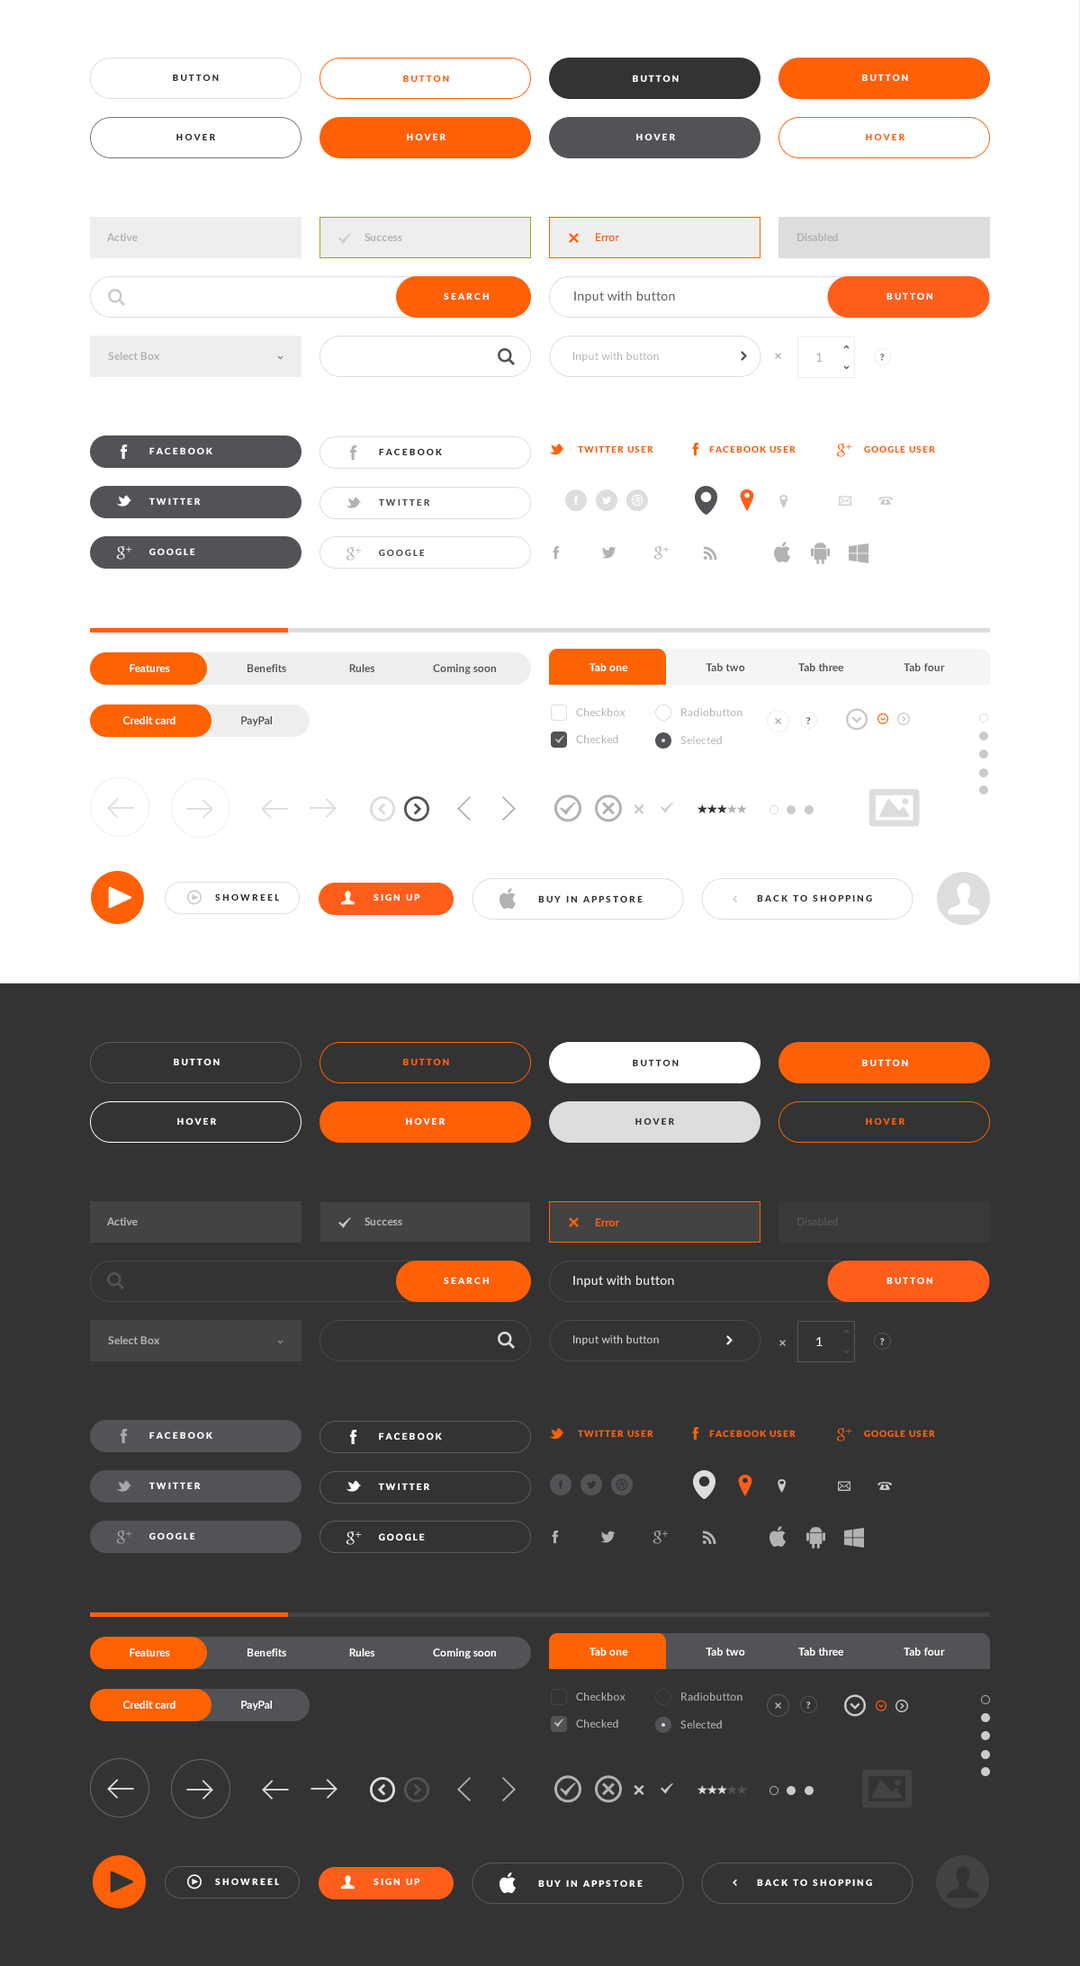
<style>
.page{position:relative;width:1080px;height:1966px;background:#ffffff}
.page>*{position:absolute;margin:0}
.t1{font:9px "Lato-Black";letter-spacing:0.2em;color:#333333}
.t2{font:9px "Lato-Black";letter-spacing:0.2em;color:#ff6008}
.t3{font:9px "Lato-Black";letter-spacing:0.2em;color:#ffffff}
.t4{font:9px "Lato-Black";letter-spacing:0.2em;color:#ff5f07}
.t5{font:10.8px "Lato-Bold";letter-spacing:0.01em;color:#b2b2b2}
.t6{font:10.8px "Lato-Regular";letter-spacing:0.01em;color:#ff6008}
.t7{font:10.8px "Lato-Bold";letter-spacing:0.01em;color:#b1b1b1}
.t8{font:9px "Lato-Black";letter-spacing:0.2em;color:#fefefe}
.t9{font:12.6px "Lato-Regular";letter-spacing:0.02em;color:#515255}
.t10{font:9px "Lato-Bold";letter-spacing:0.2em;color:#ffffff}
.t11{font:10.8px "Lato-Regular";letter-spacing:0.02em;color:#b2b2b2}
.t12{font:12.6px "Lato-Regular";letter-spacing:0.04em;color:#b2b2b2}
.t13{font:9px "Lato-Black";letter-spacing:0.1em;color:#ff5f07}
.t14{font:9px "Lato-Black";letter-spacing:0.2em;color:#515356}
.t15{font:10.8px "Lato-Bold";letter-spacing:0.01em;color:#ffffff}
.t16{font:10.8px "Lato-Bold";letter-spacing:0.01em;color:#515356}
.t17{font:10.8px "Lato-Bold";letter-spacing:0.01em;color:#515255}
.t18{font:10.8px "Lato-Bold";letter-spacing:0.01em;color:#ff6008}
.t19{font:12.6px "Lato-Regular";letter-spacing:0.02em;color:#eeeeee}
.t20{font:10.8px "Lato-Regular";letter-spacing:0.02em;color:#cbcbcb}
.t21{font:12.6px "Lato-Regular";letter-spacing:0.04em;color:#ffffff}
</style>
<div class="page">
<p class="t1" style="left:173px;top:74px;width:46px;height:7px">BUTTON</p>
<p class="t2" style="left:403px;top:75px;width:46px;height:7px">BUTTON</p>
<p class="t3" style="left:633px;top:75px;width:46px;height:7px">BUTTON</p>
<p class="t3" style="left:862px;top:74px;width:46px;height:7px">BUTTON</p>
<p class="t1" style="left:176px;top:133px;width:40px;height:7px">HOVER</p>
<p class="t3" style="left:407px;top:133px;width:39px;height:7px">HOVER</p>
<p class="t3" style="left:636px;top:133px;width:40px;height:7px">HOVER</p>
<p class="t4" style="left:866px;top:133px;width:39px;height:7px">HOVER</p>
<p class="t5" style="left:107px;top:233px;width:31px;height:8px">Active</p>
<p class="t5" style="left:364px;top:233px;width:38px;height:8px">Success</p>
<p class="t6" style="left:596px;top:233px;width:23px;height:9px">Error</p>
<p class="t7" style="left:797px;top:233px;width:41px;height:8px">Disabled</p>
<p class="t8" style="left:444px;top:292px;width:45px;height:8px">SEARCH</p>
<p class="t9" style="left:574px;top:291px;width:101px;height:12px">Input with button</p>
<p class="t10" style="left:886px;top:292px;width:46px;height:9px">BUTTON</p>
<p class="t7" style="left:108px;top:352px;width:52px;height:8px">Select Box</p>
<p class="t11" style="left:573px;top:352px;width:86px;height:10px">Input with button</p>
<p class="t12" style="left:816px;top:353px;width:7px;height:9px">1</p>
<p class="t3" style="left:149px;top:447px;width:63px;height:7px">FACEBOOK</p>
<p class="t1" style="left:379px;top:448px;width:63px;height:7px">FACEBOOK</p>
<p class="t13" style="left:578px;top:446px;width:75px;height:7px">TWITTER USER</p>
<p class="t13" style="left:709px;top:446px;width:87px;height:7px">FACEBOOK USER</p>
<p class="t13" style="left:864px;top:446px;width:71px;height:7px">GOOGLE USER</p>
<p class="t3" style="left:149px;top:498px;width:52px;height:7px">TWITTER</p>
<p class="t14" style="left:379px;top:499px;width:51px;height:7px">TWITTER</p>
<p class="t3" style="left:149px;top:548px;width:46px;height:7px">GOOGLE</p>
<p class="t14" style="left:379px;top:549px;width:46px;height:7px">GOOGLE</p>
<p class="t15" style="left:130px;top:664px;width:40px;height:8px">Features</p>
<p class="t16" style="left:248px;top:664px;width:38px;height:8px">Benefits</p>
<p class="t16" style="left:349px;top:664px;width:26px;height:8px">Rules</p>
<p class="t16" style="left:433px;top:664px;width:63px;height:11px">Coming soon</p>
<p class="t15" style="left:590px;top:663px;width:38px;height:8px">Tab one</p>
<p class="t17" style="left:706px;top:663px;width:39px;height:8px">Tab two</p>
<p class="t17" style="left:798px;top:663px;width:45px;height:8px">Tab three</p>
<p class="t17" style="left:904px;top:663px;width:41px;height:8px">Tab four</p>
<p class="t11" style="left:576px;top:708px;width:50px;height:8px">Checkbox</p>
<p class="t11" style="left:681px;top:708px;width:61px;height:8px">Radiobutton</p>
<p class="t15" style="left:123px;top:716px;width:53px;height:8px">Credit card</p>
<p class="t17" style="left:241px;top:716px;width:31px;height:10px">PayPal</p>
<p class="t11" style="left:576px;top:735px;width:42px;height:8px">Checked</p>
<p class="t11" style="left:680px;top:736px;width:42px;height:8px">Selected</p>
<p class="t1" style="left:215px;top:894px;width:64px;height:7px">SHOWREEL</p>
<p class="t3" style="left:374px;top:894px;width:46px;height:7px">SIGN UP</p>
<p class="t1" style="left:538px;top:896px;width:105px;height:7px">BUY IN APPSTORE</p>
<p class="t1" style="left:757px;top:895px;width:115px;height:7px">BACK TO SHOPPING</p>
<p class="t3" style="left:174px;top:1058px;width:46px;height:8px">BUTTON</p>
<p class="t2" style="left:403px;top:1058px;width:46px;height:8px">BUTTON</p>
<p class="t1" style="left:633px;top:1059px;width:46px;height:7px">BUTTON</p>
<p class="t3" style="left:862px;top:1059px;width:46px;height:7px">BUTTON</p>
<p class="t3" style="left:177px;top:1118px;width:40px;height:7px">HOVER</p>
<p class="t3" style="left:406px;top:1118px;width:40px;height:7px">HOVER</p>
<p class="t1" style="left:635px;top:1118px;width:40px;height:7px">HOVER</p>
<p class="t4" style="left:866px;top:1118px;width:39px;height:7px">HOVER</p>
<p class="t5" style="left:107px;top:1218px;width:31px;height:8px">Active</p>
<p class="t5" style="left:364px;top:1218px;width:38px;height:8px">Success</p>
<p class="t16" style="left:797px;top:1218px;width:41px;height:8px">Disabled</p>
<p class="t18" style="left:596px;top:1219px;width:23px;height:8px">Error</p>
<p class="t8" style="left:444px;top:1277px;width:45px;height:7px">SEARCH</p>
<p class="t19" style="left:573px;top:1275px;width:101px;height:13px">Input with button</p>
<p class="t3" style="left:886px;top:1277px;width:46px;height:7px">BUTTON</p>
<p class="t7" style="left:108px;top:1336px;width:52px;height:9px">Select Box</p>
<p class="t20" style="left:573px;top:1336px;width:86px;height:10px">Input with button</p>
<p class="t21" style="left:816px;top:1337px;width:7px;height:9px">1</p>
<p class="t3" style="left:149px;top:1432px;width:63px;height:7px">FACEBOOK</p>
<p class="t10" style="left:379px;top:1433px;width:63px;height:8px">FACEBOOK</p>
<p class="t13" style="left:578px;top:1430px;width:75px;height:7px">TWITTER USER</p>
<p class="t13" style="left:709px;top:1430px;width:87px;height:7px">FACEBOOK USER</p>
<p class="t13" style="left:864px;top:1430px;width:71px;height:7px">GOOGLE USER</p>
<p class="t3" style="left:149px;top:1482px;width:52px;height:8px">TWITTER</p>
<p class="t10" style="left:378px;top:1483px;width:52px;height:7px">TWITTER</p>
<p class="t3" style="left:149px;top:1533px;width:46px;height:7px">GOOGLE</p>
<p class="t10" style="left:379px;top:1534px;width:46px;height:8px">GOOGLE</p>
<p class="t15" style="left:130px;top:1649px;width:40px;height:8px">Features</p>
<p class="t15" style="left:248px;top:1649px;width:38px;height:8px">Benefits</p>
<p class="t15" style="left:349px;top:1649px;width:26px;height:8px">Rules</p>
<p class="t15" style="left:433px;top:1649px;width:63px;height:11px">Coming soon</p>
<p class="t15" style="left:590px;top:1648px;width:38px;height:8px">Tab one</p>
<p class="t15" style="left:706px;top:1648px;width:39px;height:8px">Tab two</p>
<p class="t15" style="left:798px;top:1648px;width:45px;height:8px">Tab three</p>
<p class="t15" style="left:904px;top:1648px;width:41px;height:8px">Tab four</p>
<p class="t11" style="left:576px;top:1693px;width:50px;height:8px">Checkbox</p>
<p class="t11" style="left:681px;top:1693px;width:61px;height:8px">Radiobutton</p>
<p class="t15" style="left:123px;top:1701px;width:53px;height:8px">Credit card</p>
<p class="t15" style="left:241px;top:1701px;width:31px;height:10px">PayPal</p>
<p class="t11" style="left:576px;top:1720px;width:42px;height:8px">Checked</p>
<p class="t11" style="left:680px;top:1721px;width:42px;height:8px">Selected</p>
<p class="t3" style="left:215px;top:1878px;width:64px;height:8px">SHOWREEL</p>
<p class="t3" style="left:374px;top:1878px;width:46px;height:8px">SIGN UP</p>
<p class="t3" style="left:538px;top:1880px;width:105px;height:7px">BUY IN APPSTORE</p>
<p class="t3" style="left:757px;top:1879px;width:115px;height:7px">BACK TO SHOPPING</p>
</div>
